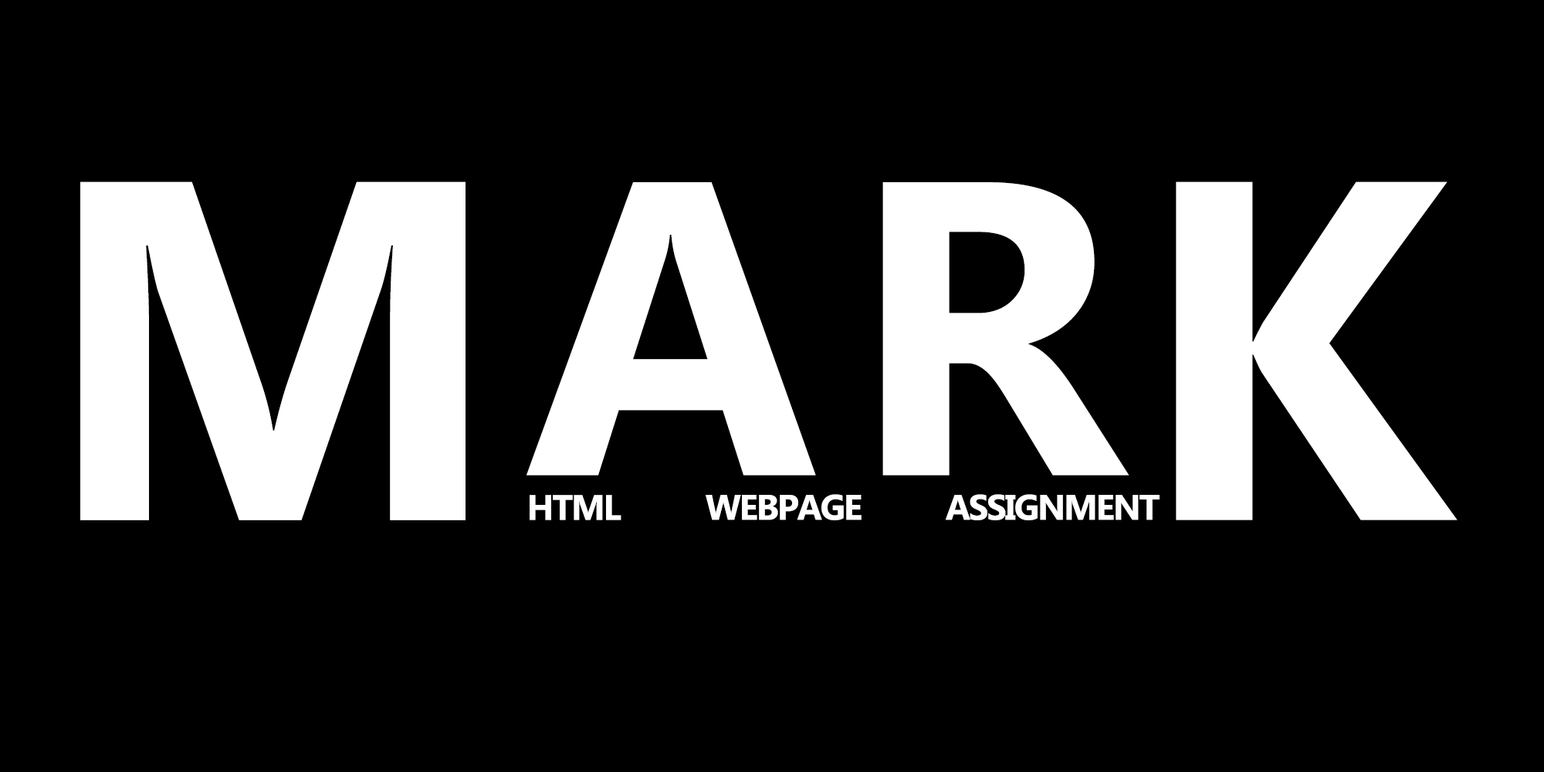
<style>
.page{position:relative;width:1544px;height:772px;background:#000000}
.page>*{position:absolute;margin:0}
.t1{font:482.6px "Ebrima-Bold";letter-spacing:-0.05em;color:#ffffff}
.t2{font:418.2px "Ebrima-Bold";letter-spacing:-0.05em;color:#ffffff}
.t3{font:35.4px "Ebrima-Bold";letter-spacing:-0.05em;color:#ffffff}
</style>
<div class="page">
<p class="t1" style="left:80px;top:181px;width:386px;height:339px">M</p>
<p class="t2" style="left:527px;top:182px;width:289px;height:294px">A</p>
<p class="t2" style="left:883px;top:182px;width:247px;height:294px">R</p>
<p class="t1" style="left:1176px;top:181px;width:282px;height:339px">K</p>
<p class="t3" style="left:530px;top:495px;width:92px;height:25px">HTML</p>
<p class="t3" style="left:706px;top:494px;width:156px;height:26px">WEBPAGE</p>
<p class="t3" style="left:945px;top:494px;width:215px;height:26px">ASSIGNMENT</p>
</div>
